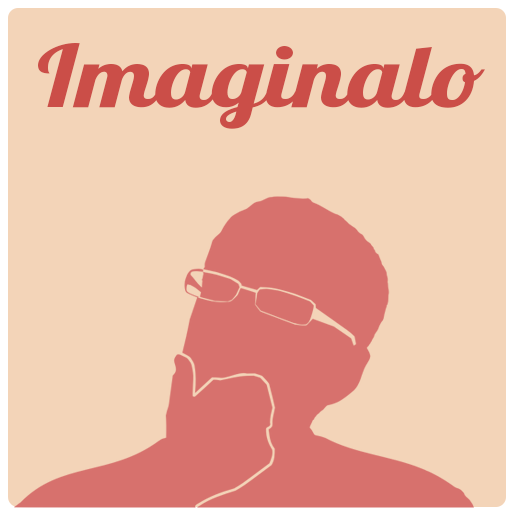
<style>
.page{position:relative;width:512px;height:512px;background:#f3d4b8}
.page>*{position:absolute;margin:0}
.t1{font:85.3px "Lobster1.4";color:#cb4e48;scale:1.25 1}
</style>
<div class="page">
<p class="t1" style="left:38px;top:43px;width:447px;height:86px">Imaginalo</p>
</div>
